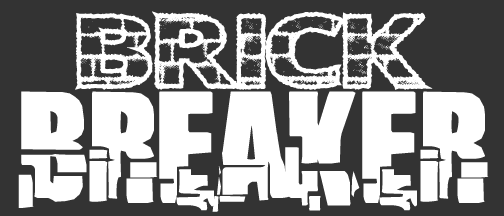
<style>
.page{position:relative;width:504px;height:216px;background:#333333}
.page>*{position:absolute;margin:0}
.t1{font:160.4px "EasyBricks";color:#ffffff}
.t2{font:160.4px "Breakaway";color:#ffffff}
</style>
<div class="page">
<p class="t1" style="left:75px;top:11px;width:358px;height:79px">BRICK</p>
<p class="t2" style="left:18px;top:91px;width:471px;height:121px">BREAKER</p>
</div>
